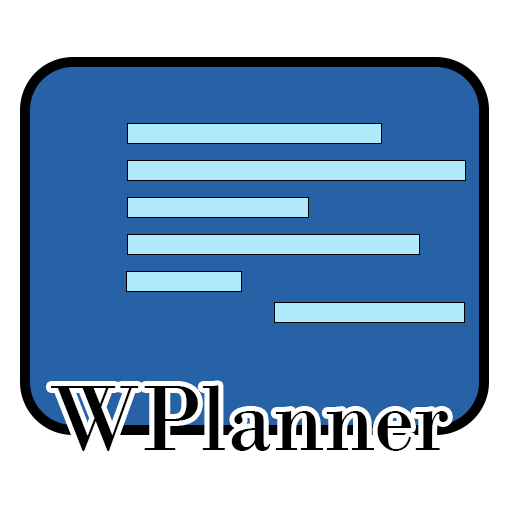
<style>
.page{position:relative;width:512px;height:512px;background:#2662a5}
.page>*{position:absolute;margin:0}
.t1{font:98.2px "BodoniMT";color:#000000;scale:0.95 1}
</style>
<div class="page">
<p class="t1" style="left:51px;top:385px;width:397px;height:66px">WPlanner</p>
</div>
